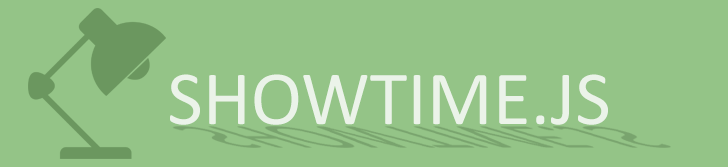
<style>
.page{position:relative;width:728px;height:167px;background:#94c487}
.page>*{position:absolute;margin:0}
.t1{font:77.2px "Calibri";color:#ebf3e9}
</style>
<div class="page">
<p class="t1" style="left:170px;top:74px;width:438px;height:51px">SHOWTIME.JS</p>
</div>
